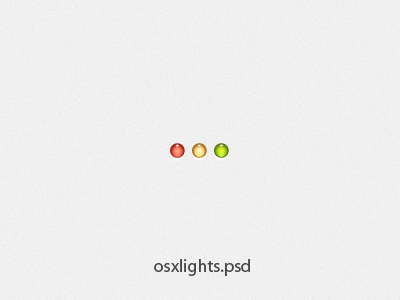
<style>
.page{position:relative;width:400px;height:300px;background:#f1f1f1}
.page>*{position:absolute;margin:0}
.t1{font:18px "MyriadPro-Regular";letter-spacing:-0.005em;color:#474747}
</style>
<div class="page">
<p class="t1" style="left:154px;top:259px;width:96px;height:17px">osxlights.psd</p>
</div>
